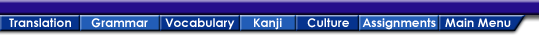
<style>
.page{position:relative;width:539px;height:35px;background:#250e8b}
.page>*{position:absolute;margin:0}
.t1{font:12px "CenturyGothic-Bold";letter-spacing:0.01em;color:#ffffff}
</style>
<div class="page">
<p class="t1" style="left:9px;top:18px;width:62px;height:9px">Translation</p>
<p class="t1" style="left:91px;top:18px;width:57px;height:10px">Grammar</p>
<p class="t1" style="left:165px;top:18px;width:70px;height:12px">Vocabulary</p>
<p class="t1" style="left:254px;top:18px;width:28px;height:12px">Kanji</p>
<p class="t1" style="left:307px;top:18px;width:42px;height:10px">Culture</p>
<p class="t1" style="left:362px;top:18px;width:74px;height:12px">Assignments</p>
<p class="t1" style="left:445px;top:18px;width:66px;height:9px">Main Menu</p>
</div>
